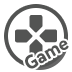
<style>
.page{position:relative;width:72px;height:72px;background:#ffffff}
.page>*{position:absolute;margin:0}
.t1{font:18.8px "MikadoMedium";color:#535453}
</style>
<div class="page">
<p class="t1" style="left:25px;top:40px;width:44px;height:29px;rotate:-30deg">Game</p>
</div>
